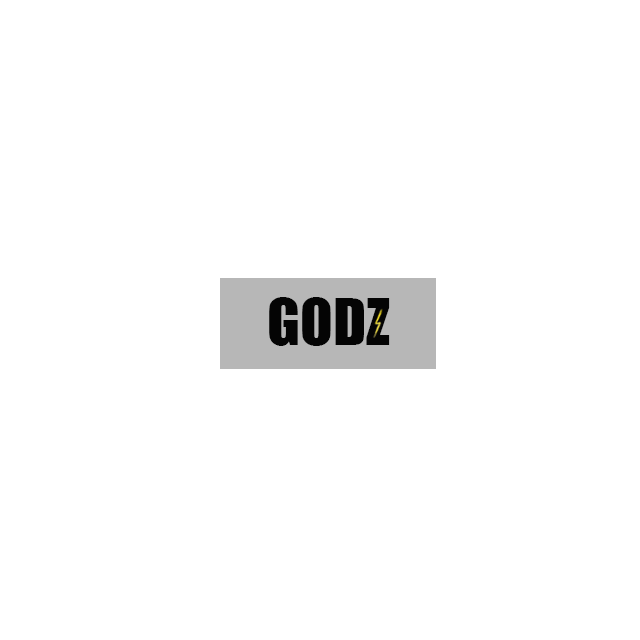
<style>
.page{position:relative;width:640px;height:640px;background:#ffffff}
.page>*{position:absolute;margin:0}
.t1{font:60px "Impact";color:#040404}
</style>
<div class="page">
<p class="t1" style="left:269px;top:297px;width:121px;height:49px">GODZ</p>
</div>
